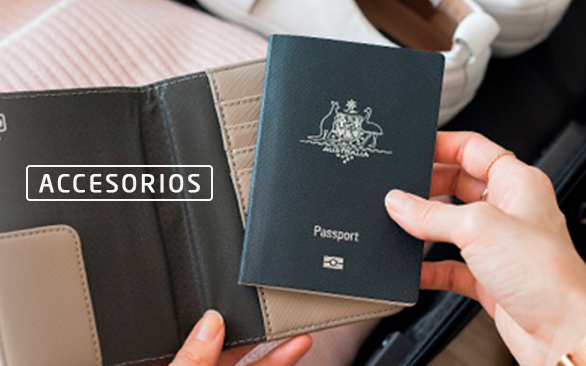
<style>
.page{position:relative;width:586px;height:366px}
.page>*{position:absolute;margin:0}
.t1{font:24px "NeoSansPro-Regular";letter-spacing:0.1em;color:#f5f5f5;font-weight:bold}
</style>
<div class="page">
<p class="t1" style="left:39px;top:174px;width:161px;height:19px">ACCESORIOS</p>
</div>
